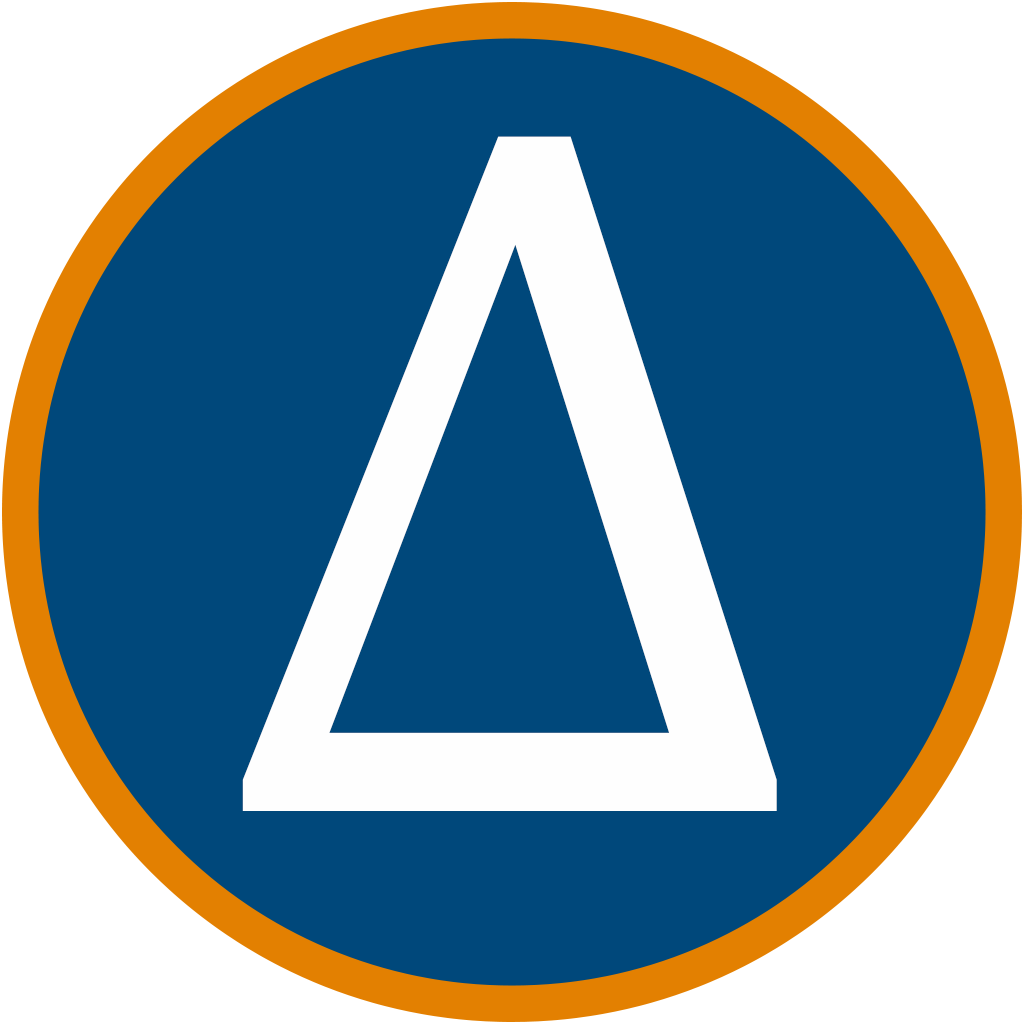
<style>
.page{position:relative;width:1024px;height:1024px;background:#00487b}
.page>*{position:absolute;margin:0}
.t1{font:1000px "Cambria";color:#fefefe}
</style>
<div class="page">
<p class="t1" style="left:242px;top:136px;width:535px;height:675px">Δ</p>
</div>
